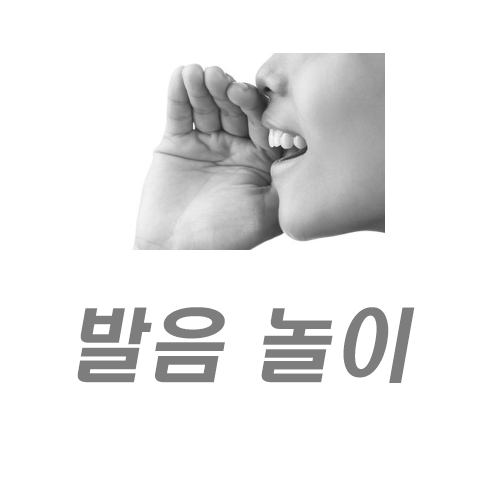
<style>
.page{position:relative;width:500px;height:500px;background:#ffffff}
.page>*{position:absolute;margin:0}
.t1{font:80px "H2hdrM";color:#7d7d7d;font-style:italic}
</style>
<div class="page">
<p class="t1" style="left:77px;top:307px;width:338px;height:76px">발음 놀이</p>
</div>
